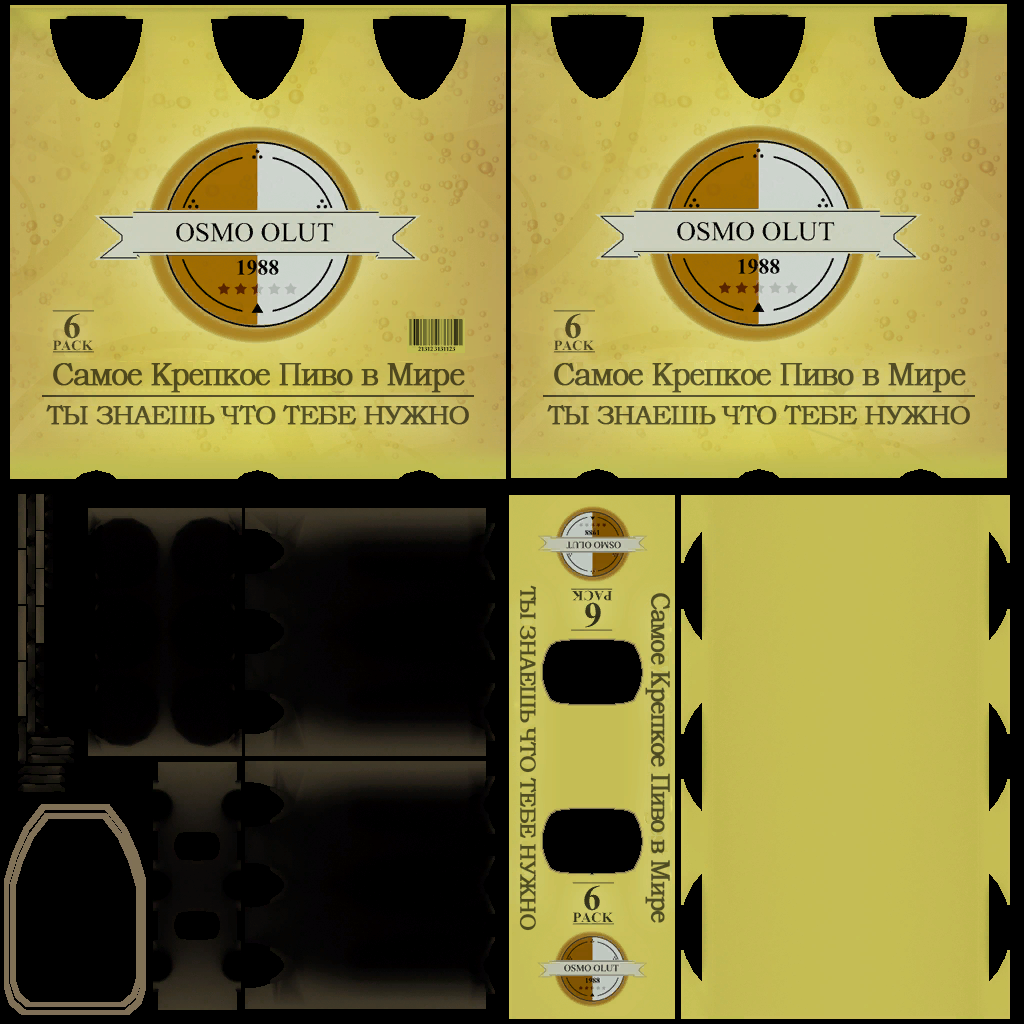
<style>
.page{position:relative;width:1024px;height:1024px;background:#000000}
.page>*{position:absolute;margin:0}
.t1{font:33px "BookmanOldStyle";letter-spacing:-0.06em;color:#504a1d;font-weight:bold;scale:0.91 1}
.t2{font:33px "BookmanOldStyle";letter-spacing:-0.06em;color:#534e26;font-weight:bold;scale:0.91 1}
.t3{font:27px "BookmanOldStyle";letter-spacing:-0.06em;color:#534e24;font-weight:bold}
.t4{font:27px "BookmanOldStyle";letter-spacing:-0.06em;color:#534e25;font-weight:bold}
.t5{font:22px "BookmanOldStyle";letter-spacing:-0.06em;color:#4f4c20;font-weight:bold}
.t6{font:26.4px "BookmanOldStyle";letter-spacing:-0.06em;color:#4f4c23;font-weight:bold;scale:0.91 1}
</style>
<div class="page">
<p class="t1" style="left:53px;top:363px;width:412px;height:30px">Самое Крепкое Пиво в Мире</p>
<p class="t2" style="left:554px;top:363px;width:412px;height:30px">Самое Крепкое Пиво в Мире</p>
<p class="t3" style="left:46px;top:405px;width:423px;height:20px">ТЫ ЗНАЕШЬ ЧТО ТЕБЕ НУЖНО</p>
<p class="t4" style="left:547px;top:405px;width:423px;height:20px">ТЫ ЗНАЕШЬ ЧТО ТЕБЕ НУЖНО</p>
<p class="t5" style="left:519px;top:585px;width:18px;height:346px;rotate:90deg">ТЫ ЗНАЕШЬ ЧТО ТЕБЕ НУЖНО</p>
<p class="t6" style="left:645px;top:593px;width:26px;height:330px;rotate:90deg">Самое Крепкое Пиво в Мире</p>
</div>
